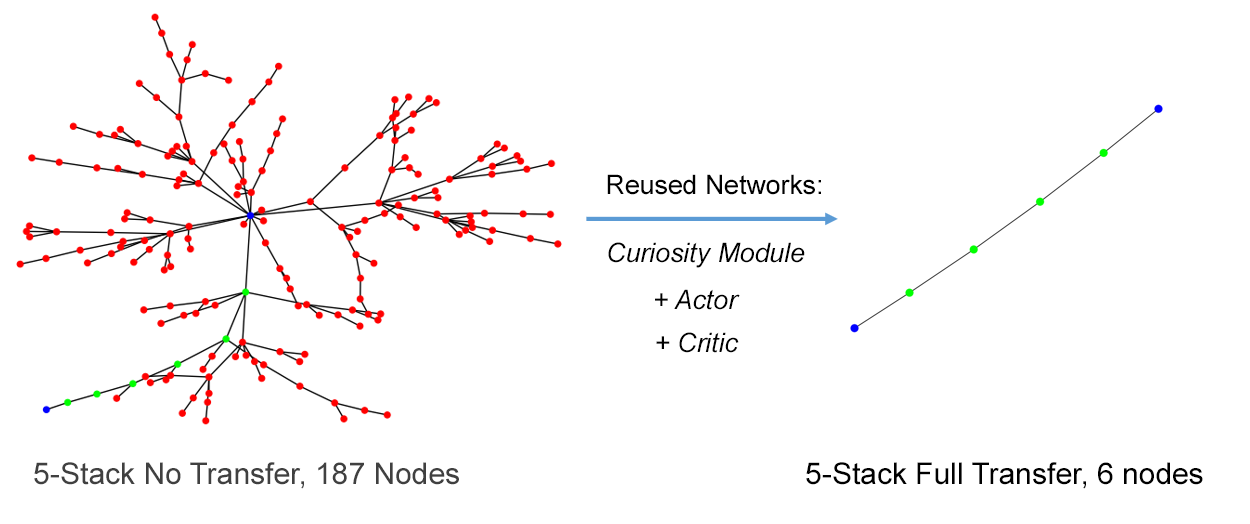
<style>
.page{position:relative;width:1250px;height:524px;background:#ffffff}
.page>*{position:absolute;margin:0}
.t1{font:26.7px "ArialMT";color:#000000}
.t2{font:26.7px "Arial-ItalicMT";color:#000000}
.t3{font:30px "ArialMT";color:#404040}
.t4{font:30px "ArialMT";color:#000000}
</style>
<div class="page">
<p class="t1" style="left:607px;top:174px;width:214px;height:21px">Reused Networks:</p>
<p class="t2" style="left:608px;top:242px;width:197px;height:26px">Curiosity Module</p>
<p class="t2" style="left:655px;top:289px;width:85px;height:21px">+ Actor</p>
<p class="t2" style="left:656px;top:332px;width:83px;height:21px">+ Critic</p>
<p class="t3" style="left:34px;top:462px;width:425px;height:27px">5-Stack No Transfer, 187 Nodes</p>
<p class="t4" style="left:806px;top:462px;width:397px;height:27px">5-Stack Full Transfer, 6 nodes</p>
</div>
